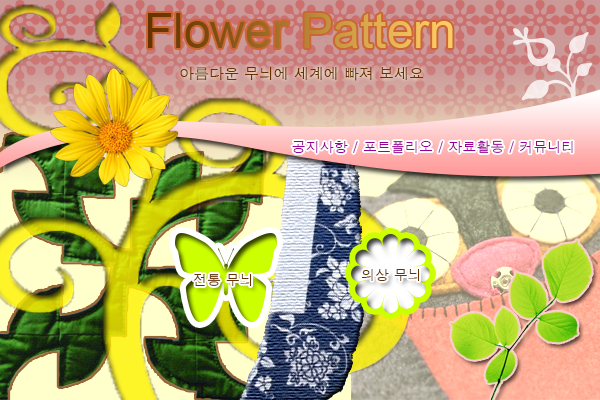
<style>
.page{position:relative;width:600px;height:400px}
.page>*{position:absolute;margin:0}
.t1{font:48px "ArialMT"}
.t2{font:15px "Dotum";color:#663300}
.t3{font:14px "Dotum";color:#990099}
.t4{font:14px "Dotum";color:#663300}
</style>
<div class="page">
<p class="t1" style="left:148px;top:13px;width:305px;height:35px">Flower Pattern</p>
<p class="t2" style="left:180px;top:67px;width:243px;height:14px">아름다운 무늬에 세계에 빠져 보세요</p>
<p class="t3" style="left:292px;top:140px;width:281px;height:14px">공지사항 / 포트폴리오 / 자료활동 / 커뮤니티</p>
<p class="t4" style="left:361px;top:269px;width:58px;height:12px">의상 무늬</p>
<p class="t4" style="left:193px;top:274px;width:58px;height:12px">전통 무늬</p>
</div>
